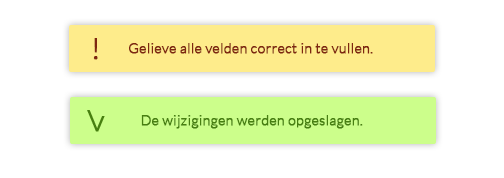
<style>
.page{position:relative;width:504px;height:178px;background:#ffffff}
.page>*{position:absolute;margin:0}
.t1{font:30px "Lato-Light";letter-spacing:0.005em;color:#7f2710;font-weight:bold}
.t2{font:14px "Lato-Light";letter-spacing:0.005em;color:#7f2710;font-weight:bold}
.t3{font:14px "Lato-Light";letter-spacing:0.005em;color:#477f10;font-weight:bold}
</style>
<div class="page">
<p class="t1" style="left:93px;top:38px;width:5px;height:22px">!</p>
<p class="t2" style="left:129px;top:43px;width:244px;height:11px">Gelieve alle velden correct in te vullen.</p>
<p class="t3" style="left:141px;top:115px;width:222px;height:14px">De wijzigingen werden opgeslagen.</p>
</div>
